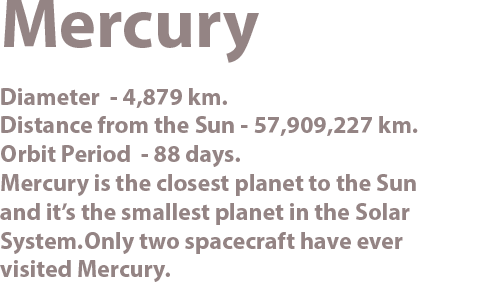
<style>
.page{position:relative;width:500px;height:298px;background:#ffffff}
.page>*{position:absolute;margin:0}
.t1{font:24px "MyriadHebrew-Bold";color:#887777}
.t2{font:70px "MyriadHebrew-Bold";color:#887777}
</style>
<div class="page">
<p class="t1" style="left:0px;top:0px;width:418px;height:282px;text-align:right;opacity:0.9"><span class="t2">Mercury<br></span><br>Diameter  - 4,879 km.<br>Distance from the Sun - 57,909,227 km.<br>Orbit Period  - 88 days.<br>Mercury is the closest planet to the Sun<br>and it’s the smallest planet in the Solar<br>System.Only two spacecraft have ever<br>visited Mercury.</p>
</div>
